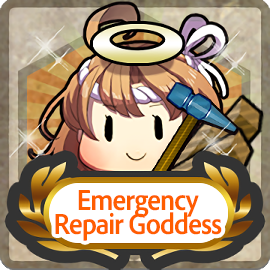
<style>
.page{position:relative;width:270px;height:270px}
.page>*{position:absolute;margin:0}
.t1{font:30px/24px "AdobeClean-Bold";letter-spacing:-0.04em;color:#ff5d00;scale:0.9 1}
</style>
<div class="page">
<p class="t1" style="left:55px;top:190px;width:167px;height:51px;text-align:center">Emergency<br>Repair Goddess</p>
</div>
